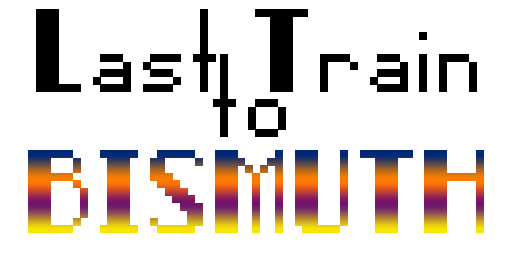
<style>
.page{position:relative;width:512px;height:256px;background:#ffffff}
.page>*{position:absolute;margin:0}
.t1{font:60px "Pixel-Noir-Regular";letter-spacing:0.08em;color:#000000}
.t2{font:60px "Pixel-Noir-Regular";letter-spacing:0.08em}
</style>
<div class="page">
<p class="t1" style="left:36px;top:9px;width:441px;height:83px">Last Train</p>
<p class="t1" style="left:213px;top:54px;width:73px;height:83px">to</p>
<p class="t2" style="left:28px;top:150px;width:456px;height:83px">BISMUTH</p>
</div>
